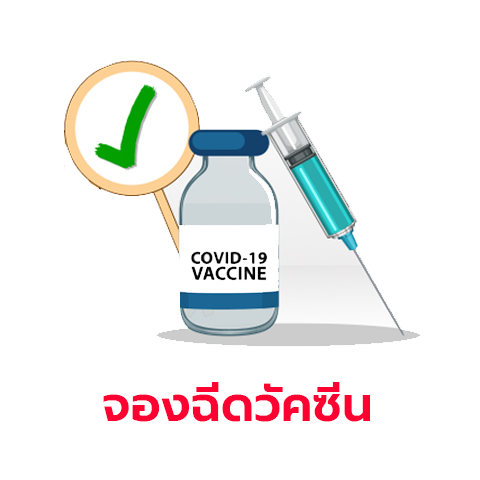
<style>
.page{position:relative;width:480px;height:480px;background:#ffffff}
.page>*{position:absolute;margin:0}
.t1{font:48px "Prompt-SemiBold";color:#ff0033}
</style>
<div class="page">
<p class="t1" style="left:103px;top:382px;width:267px;height:40px">จองฉีดวัคซีน</p>
</div>
